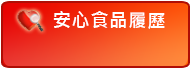
<style>
.page{position:relative;width:191px;height:73px}
.page>*{position:absolute;margin:0}
.t1{font:18px "MicrosoftJhengHeiBold";color:#ffffff}
</style>
<div class="page">
<p class="t1" style="left:53px;top:11px;width:112px;height:18px">安心食品履歷</p>
</div>
